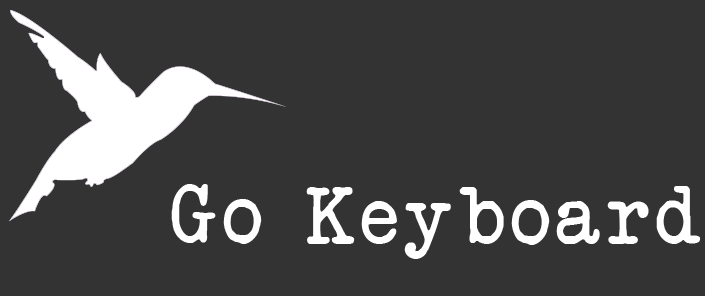
<style>
.page{position:relative;width:705px;height:296px;background:#333333}
.page>*{position:absolute;margin:0}
.t1{font:80px "AnotherTypewriter";letter-spacing:0.08em;color:#ffffff}
</style>
<div class="page">
<p class="t1" style="left:171px;top:184px;width:91px;height:60px">Go</p>
<p class="t1" style="left:306px;top:186px;width:395px;height:73px">Keyboard</p>
</div>
